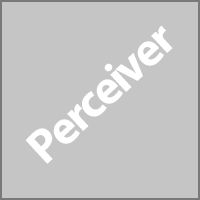
<style>
.page{position:relative;width:200px;height:200px;background:#c6c5c5}
.page>*{position:absolute;margin:0}
.t1{font:48px "MyriadPro-Bold";letter-spacing:-0.05em;color:#ffffff}
</style>
<div class="page">
<p class="t1" style="left:25px;top:25px;width:148px;height:139px;rotate:-43deg">Perceiver</p>
</div>
